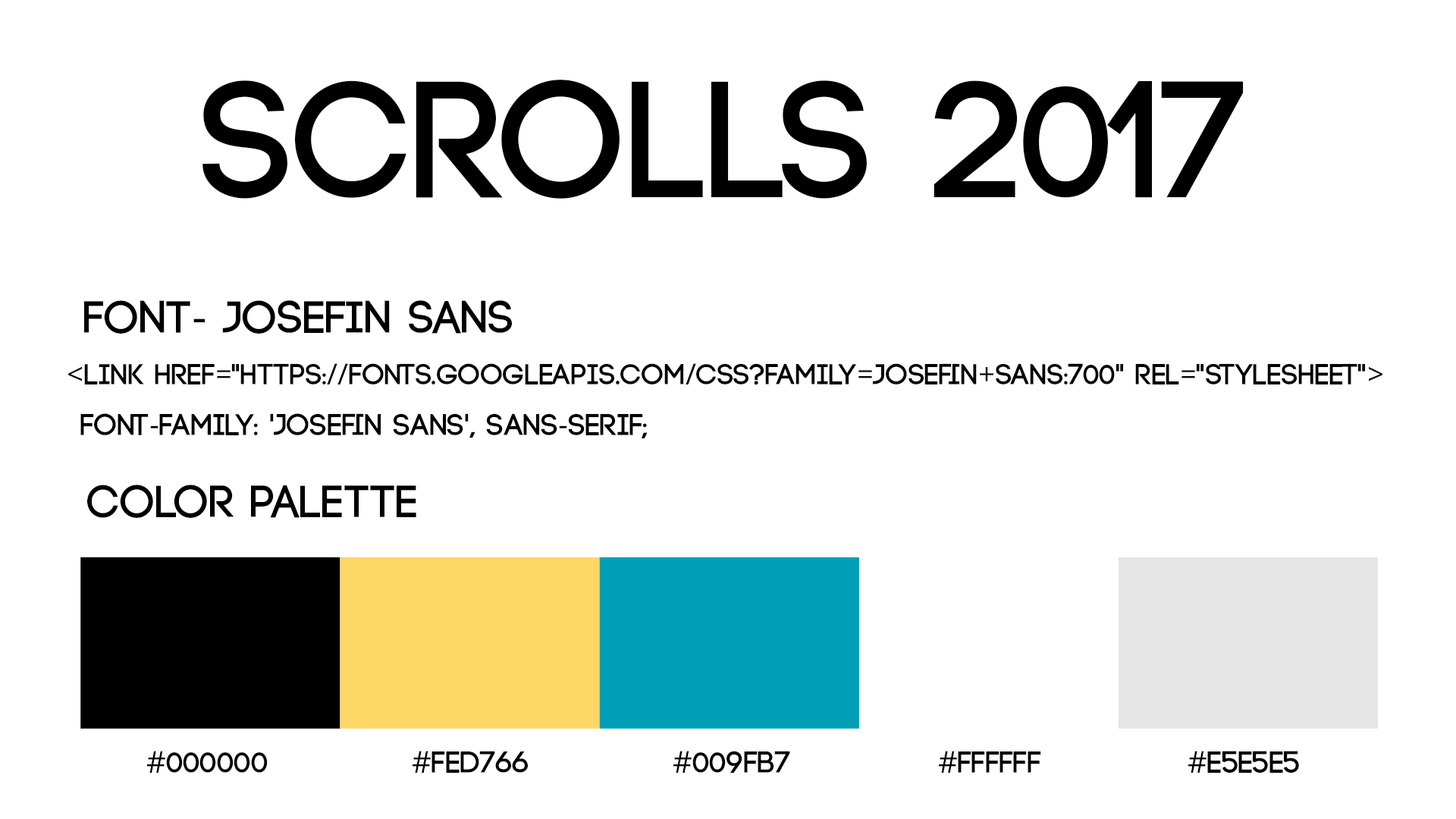
<style>
.page{position:relative;width:1456px;height:819px;background:#ffffff}
.page>*{position:absolute;margin:0}
.t1{font:165.3px "Code-Bold";letter-spacing:0.01em;color:#000000}
.t2{font:45.7px "Code-Bold";letter-spacing:0.01em;color:#000000}
.t3{font:45.7px "OpenSans";letter-spacing:0.01em;color:#000000}
.t4{font:29.2px "Code-Bold";letter-spacing:0.01em;color:#000000}
.t5{font:29.2px "OpenSans";letter-spacing:0.01em;color:#000000}
.t6{font:30.3px "Code-Bold";letter-spacing:0.01em;color:#000000}
.t7{font:30.3px "OpenSans";letter-spacing:0.01em;color:#000000}
</style>
<div class="page">
<p class="t1" style="left:202px;top:80px;width:1042px;height:119px">SCROLLS 2017</p>
<p class="t2" style="left:84px;top:300px;width:428px;height:34px">FONT<span class="t3">-</span> JOSEFIN SANS</p>
<p class="t4" style="left:68px;top:363px;width:1314px;height:22px"><span class="t5">&lt;</span>link href<span class="t5">=</span>"https:<span class="t5">//</span>fonts.googleapis.com<span class="t5">/</span>css?family<span class="t5">=</span>Josefin<span class="t5">+</span>Sans:700" rel<span class="t5">=</span>"stylesheet"<span class="t5">&gt;</span></p>
<p class="t6" style="left:80px;top:413px;width:568px;height:25px">font<span class="t7">-</span>family: 'Josefin Sans', sans<span class="t7">-</span>serif;</p>
<p class="t2" style="left:87px;top:485px;width:329px;height:33px">COLOR PALETTE</p>
<p class="t6" style="left:147px;top:751px;width:121px;height:22px"><span class="t7">#</span>000000</p>
<p class="t6" style="left:413px;top:751px;width:116px;height:22px"><span class="t7">#</span>FED766</p>
<p class="t6" style="left:673px;top:751px;width:117px;height:22px"><span class="t7">#</span>009FB7</p>
<p class="t6" style="left:939px;top:751px;width:102px;height:22px"><span class="t7">#</span>FFFFFF</p>
<p class="t6" style="left:1188px;top:751px;width:111px;height:22px"><span class="t7">#</span>E5E5E5</p>
</div>
